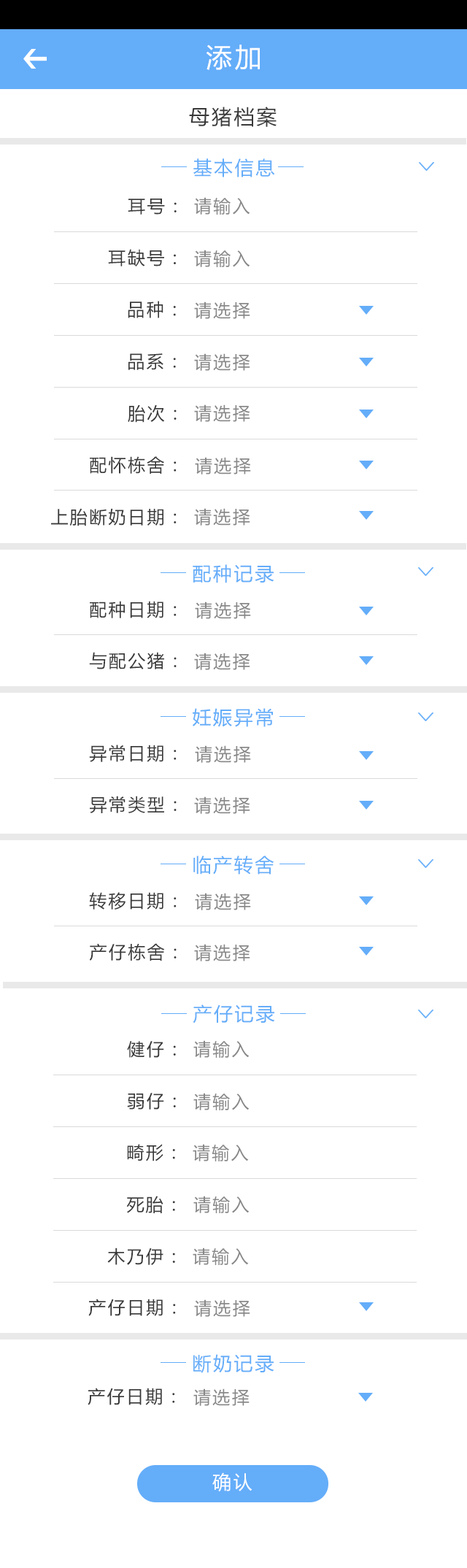
<style>
.page{position:relative;width:467px;height:1568px;background:#ffffff}
.page>*{position:absolute;margin:0}
.t1{font:26.3px "MicrosoftYaHei";letter-spacing:0.1em;color:#ffffff}
.t2{font:20.4px "MicrosoftYaHei";letter-spacing:0.1em;color:#3a3939}
.t3{font:19px "MicrosoftYaHei";letter-spacing:0.1em;color:#64adf9}
.t4{font:17.5px "MicrosoftYaHei";letter-spacing:0.1em;color:#898888}
.t5{font:17.5px "MicrosoftYaHei";letter-spacing:0.1em;color:#3a3939}
.t6{font:19px "MicrosoftYaHei";letter-spacing:0.1em;color:#ffffff}
</style>
<div class="page">
<p class="t1" style="left:206px;top:45px;width:54px;height:25px">添加</p>
<p class="t2" style="left:189px;top:107px;width:88px;height:20px">母猪档案</p>
<p class="t3" style="left:193px;top:158px;width:82px;height:19px">基本信息</p>
<p class="t4" style="left:194px;top:197px;width:56px;height:18px">请输入</p>
<p class="t5" style="left:128px;top:199px;width:49px;height:16px">耳号：</p>
<p class="t5" style="left:108px;top:249px;width:68px;height:17px">耳缺号：</p>
<p class="t4" style="left:194px;top:250px;width:56px;height:17px">请输入</p>
<p class="t5" style="left:128px;top:301px;width:48px;height:17px">品种：</p>
<p class="t4" style="left:194px;top:301px;width:56px;height:18px">请选择</p>
<p class="t5" style="left:128px;top:353px;width:48px;height:17px">品系：</p>
<p class="t4" style="left:194px;top:353px;width:56px;height:18px">请选择</p>
<p class="t5" style="left:128px;top:404px;width:49px;height:19px">胎次：</p>
<p class="t4" style="left:194px;top:404px;width:56px;height:18px">请选择</p>
<p class="t5" style="left:90px;top:456px;width:87px;height:18px">配怀栋舍：</p>
<p class="t4" style="left:195px;top:457px;width:56px;height:17px">请选择</p>
<p class="t5" style="left:51px;top:508px;width:126px;height:18px">上胎断奶日期：</p>
<p class="t4" style="left:194px;top:508px;width:56px;height:18px">请选择</p>
<p class="t3" style="left:193px;top:564px;width:81px;height:19px">配种记录</p>
<p class="t5" style="left:90px;top:601px;width:87px;height:17px">配种日期：</p>
<p class="t4" style="left:195px;top:602px;width:56px;height:17px">请选择</p>
<p class="t5" style="left:89px;top:652px;width:88px;height:17px">与配公猪：</p>
<p class="t4" style="left:194px;top:653px;width:56px;height:17px">请选择</p>
<p class="t3" style="left:193px;top:708px;width:80px;height:19px">妊娠异常</p>
<p class="t5" style="left:89px;top:745px;width:88px;height:17px">异常日期：</p>
<p class="t4" style="left:195px;top:745px;width:56px;height:18px">请选择</p>
<p class="t5" style="left:90px;top:796px;width:87px;height:17px">异常类型：</p>
<p class="t4" style="left:194px;top:796px;width:56px;height:18px">请选择</p>
<p class="t3" style="left:193px;top:856px;width:81px;height:19px">临产转舍</p>
<p class="t5" style="left:89px;top:892px;width:88px;height:18px">转移日期：</p>
<p class="t4" style="left:195px;top:893px;width:56px;height:17px">请选择</p>
<p class="t5" style="left:89px;top:943px;width:88px;height:18px">产仔栋舍：</p>
<p class="t4" style="left:194px;top:944px;width:56px;height:17px">请选择</p>
<p class="t3" style="left:193px;top:1004px;width:82px;height:19px">产仔记录</p>
<p class="t5" style="left:127px;top:1041px;width:49px;height:17px">健仔：</p>
<p class="t4" style="left:193px;top:1040px;width:57px;height:18px">请输入</p>
<p class="t5" style="left:127px;top:1093px;width:49px;height:17px">弱仔：</p>
<p class="t4" style="left:193px;top:1093px;width:57px;height:17px">请输入</p>
<p class="t5" style="left:127px;top:1144px;width:48px;height:17px">畸形：</p>
<p class="t4" style="left:193px;top:1144px;width:56px;height:17px">请输入</p>
<p class="t5" style="left:126px;top:1196px;width:49px;height:17px">死胎：</p>
<p class="t4" style="left:193px;top:1196px;width:57px;height:17px">请输入</p>
<p class="t5" style="left:107px;top:1248px;width:68px;height:17px">木乃伊：</p>
<p class="t4" style="left:193px;top:1248px;width:56px;height:17px">请输入</p>
<p class="t5" style="left:88px;top:1299px;width:88px;height:17px">产仔日期：</p>
<p class="t4" style="left:194px;top:1299px;width:56px;height:18px">请选择</p>
<p class="t3" style="left:193px;top:1354px;width:81px;height:19px">断奶记录</p>
<p class="t5" style="left:88px;top:1388px;width:87px;height:17px">产仔日期：</p>
<p class="t4" style="left:193px;top:1388px;width:57px;height:18px">请选择</p>
<p class="t6" style="left:212px;top:1472px;width:41px;height:20px">确认</p>
</div>
